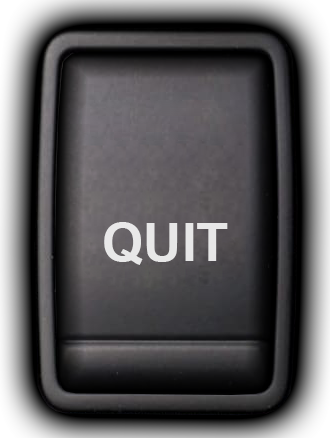
<style>
.page{position:relative;width:330px;height:438px}
.page>*{position:absolute;margin:0}
.t1{font:52.9px "Arial-BoldMT";color:#ffffff}
</style>
<div class="page">
<p class="t1" style="left:104px;top:222px;width:124px;height:43px;opacity:0.82">QUIT</p>
</div>
